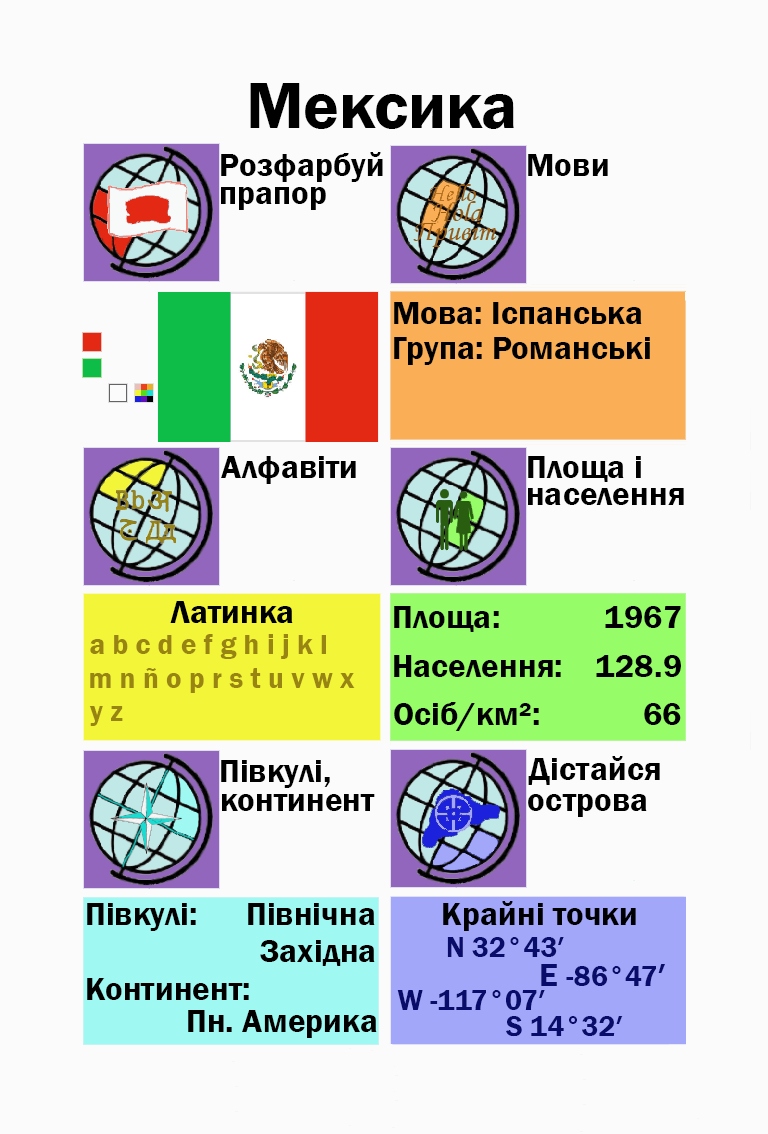
<style>
.page{position:relative;width:768px;height:1134px;background:#fbfbfb}
.page>*{position:absolute;margin:0}
.t1{font:66.7px "FranklinGothic-Demi";color:#000000}
.t2{font:33.3px "FranklinGothic-Demi";color:#000000}
.t3{font:33.3px "FranklinGothic-Demi";color:#000003}
.t4{font:29.2px "FranklinGothic-Demi";color:#988413}
.t5{font:29.2px "FranklinGothic-Demi";color:#090c69}
.t6{font:33.3px "FranklinGothic-Demi";color:#090c69}
</style>
<div class="page">
<p class="t1" style="left:250px;top:83px;width:264px;height:46px">Мексика</p>
<p class="t2" style="left:221px;top:152px;width:162px;height:30px">Розфарбуй</p>
<p class="t2" style="left:528px;top:154px;width:80px;height:22px">Мови</p>
<p class="t2" style="left:221px;top:187px;width:105px;height:23px">прапор</p>
<p class="t2" style="left:394px;top:302px;width:248px;height:22px">Мова: Іспанська</p>
<p class="t2" style="left:394px;top:337px;width:256px;height:28px">Група: Романські</p>
<p class="t2" style="left:221px;top:456px;width:135px;height:28px">Алфавіти</p>
<p class="t2" style="left:528px;top:456px;width:113px;height:26px">Площа і</p>
<p class="t2" style="left:528px;top:488px;width:156px;height:17px">населення</p>
<p class="t2" style="left:170px;top:601px;width:123px;height:22px">Латинка</p>
<p class="t2" style="left:394px;top:606px;width:105px;height:26px">Площа:</p>
<p class="t3" style="left:605px;top:606px;width:76px;height:22px">1967</p>
<p class="t4" style="left:90px;top:634px;width:236px;height:25px">a b c d e f g h i j k l</p>
<p class="t2" style="left:394px;top:655px;width:167px;height:22px">Населення:</p>
<p class="t2" style="left:596px;top:655px;width:85px;height:22px">128.9</p>
<p class="t4" style="left:90px;top:668px;width:265px;height:25px">m n ñ o p r s t u v w x</p>
<p class="t2" style="left:394px;top:702px;width:145px;height:29px">Осіб/км²:</p>
<p class="t4" style="left:89px;top:706px;width:34px;height:20px">y z</p>
<p class="t2" style="left:644px;top:703px;width:37px;height:22px">66</p>
<p class="t2" style="left:221px;top:760px;width:109px;height:28px">Півкулі,</p>
<p class="t2" style="left:528px;top:756px;width:132px;height:29px">Дістайся</p>
<p class="t2" style="left:222px;top:794px;width:153px;height:17px">континент</p>
<p class="t2" style="left:528px;top:794px;width:119px;height:23px">острова</p>
<p class="t2" style="left:87px;top:903px;width:109px;height:28px">Півкулі:</p>
<p class="t2" style="left:248px;top:903px;width:127px;height:22px">Північна</p>
<p class="t3" style="left:443px;top:901px;width:193px;height:30px">Крайні точки</p>
<p class="t2" style="left:260px;top:940px;width:115px;height:26px">Західна</p>
<p class="t5" style="left:447px;top:937px;width:117px;height:20px">N 32°43′</p>
<p class="t5" style="left:541px;top:964px;width:124px;height:22px"><span class="t6">E </span>-86°47<span class="t6">′</span></p>
<p class="t2" style="left:87px;top:978px;width:162px;height:22px">Континент:</p>
<p class="t5" style="left:397px;top:990px;width:148px;height:20px">W -117°07′</p>
<p class="t2" style="left:188px;top:1010px;width:189px;height:28px">Пн. Америка</p>
<p class="t5" style="left:506px;top:1016px;width:117px;height:21px">S 14°32′</p>
</div>
